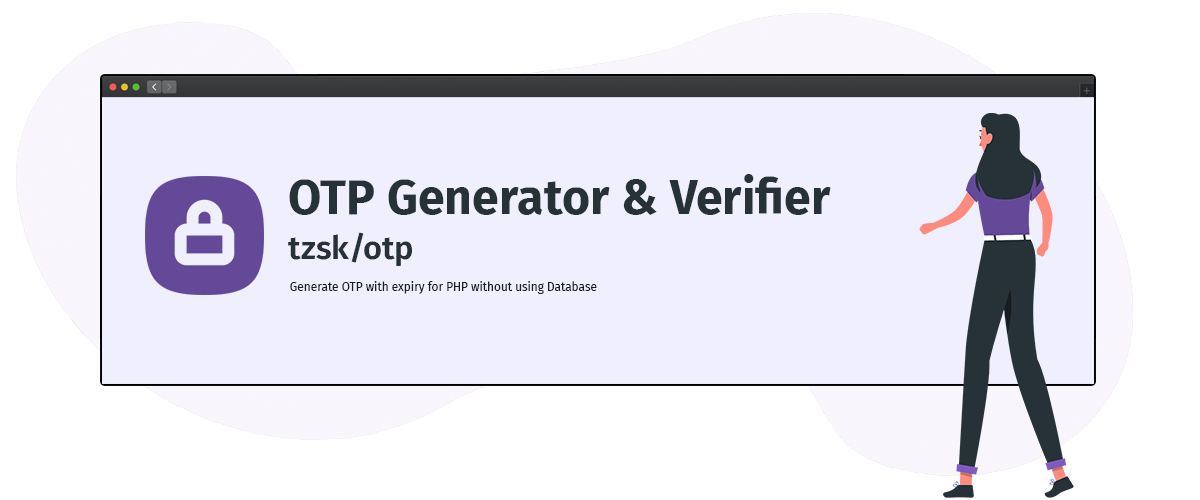
<style>
.page{position:relative;width:1200px;height:500px;background:#f0effd}
.page>*{position:absolute;margin:0}
.t1{font:48.2px "FiraSans-Bold";color:#263238}
.t2{font:32.6px "FiraSans-SemiBold";color:#263238}
.t3{font:11.8px "FiraSans-Regular";color:#171e21}
</style>
<div class="page">
<p class="t1" style="left:289px;top:174px;width:542px;height:41px">OTP Generator &amp; Verifier</p>
<p class="t2" style="left:288px;top:232px;width:124px;height:35px">tzsk/otp</p>
<p class="t3" style="left:290px;top:281px;width:307px;height:13px">Generate OTP with expiry for PHP without using Database</p>
</div>
